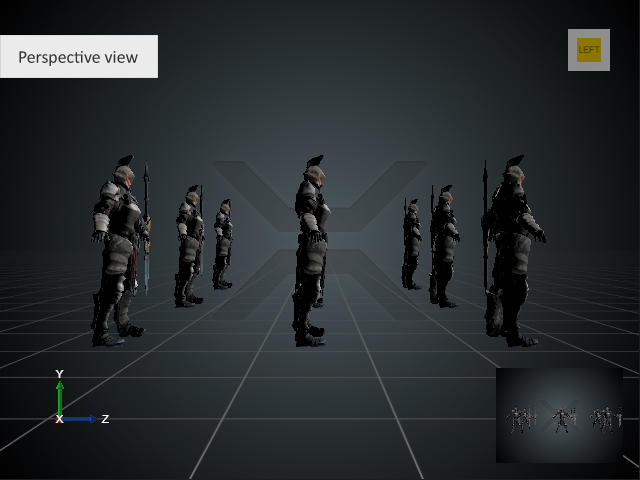
<style>
.page{position:relative;width:640px;height:480px}
.page>*{position:absolute;margin:0}
.t1{font:18px "Calibri";color:#333333}
</style>
<div class="page">
<p class="t1" style="left:19px;top:51px;width:119px;height:15px">Perspective view</p>
</div>
